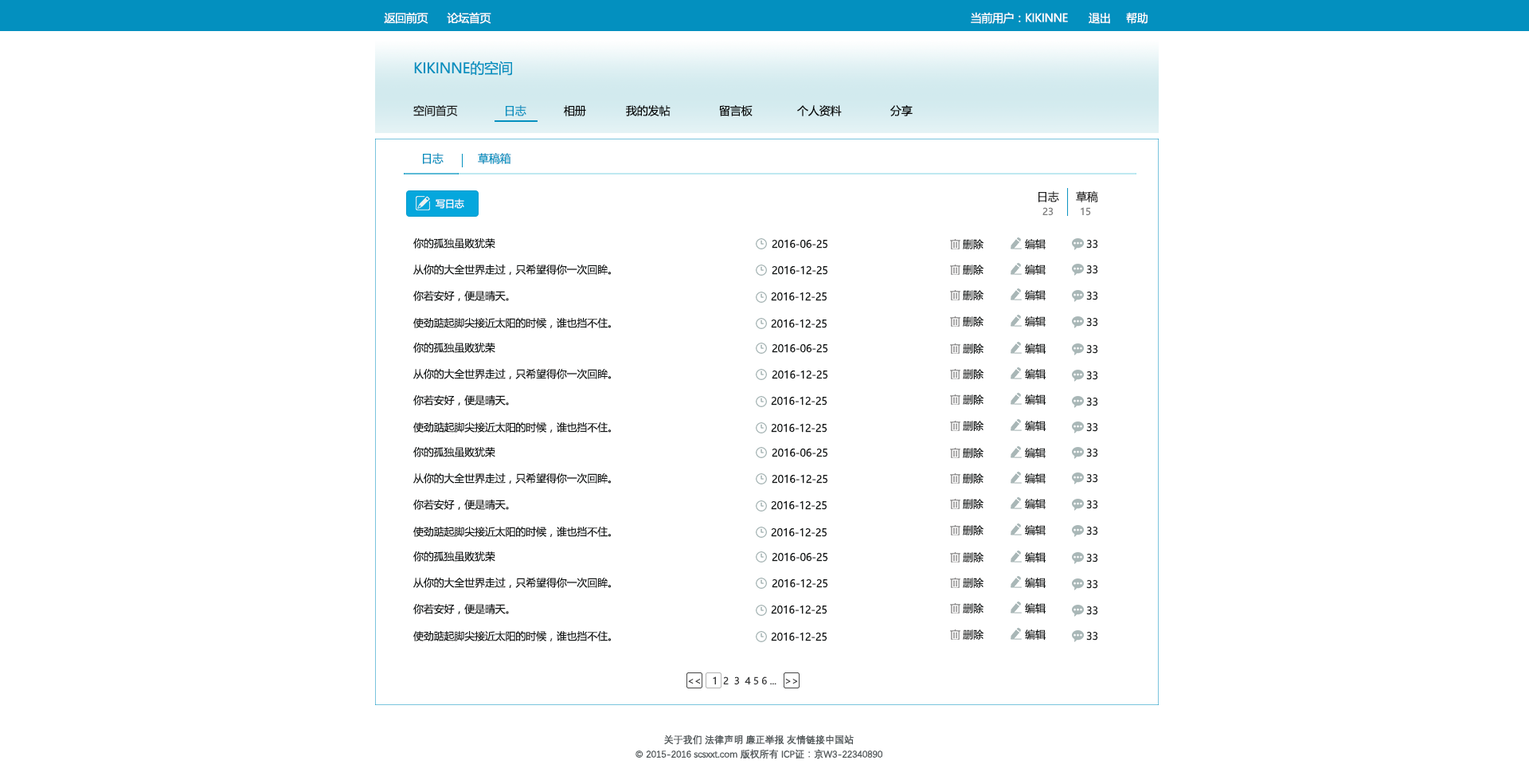
<style>
.page{position:relative;width:1529px;height:780px;background:#ffffff}
.page>*{position:absolute;margin:0}
.t1{font:11.2px "MicrosoftYaHei";letter-spacing:-0.025em;color:#ffffff}
.t2{font:14.3px "MicrosoftYaHei";letter-spacing:-0.01em;color:#0390bf}
.t3{font:11.2px "MicrosoftYaHei";letter-spacing:-0.01em;color:#1f2020}
.t4{font:11.2px "MicrosoftYaHei";letter-spacing:-0.01em;color:#0390bf}
.t5{font:11.2px "MicrosoftYaHei";letter-spacing:-0.01em;color:#040404}
.t6{font:11.2px "MicrosoftYaHei";letter-spacing:-0.01em;color:#242323}
.t7{font:9.6px "MicrosoftYaHei";letter-spacing:-0.01em;color:#ffffff}
.t8{font:9.6px "MicrosoftYaHei";letter-spacing:-0.01em;color:#7b7b7b}
.t9{font:10.4px "MicrosoftYaHei";letter-spacing:-0.01em;color:#131616}
.t10{font:9.6px "MicrosoftYaHei";letter-spacing:-0.01em;color:#38393a}
.t11{font:9.6px "MicrosoftYaHei";letter-spacing:-0.01em;color:#252626}
.t12{font:9.6px/14.3px "DengXian-Regular";letter-spacing:-0.025em;color:#545a5c;font-weight:bold}
</style>
<div class="page">
<p class="t1" style="left:384px;top:12px;width:45px;height:12px">返回前页</p>
<p class="t1" style="left:447px;top:12px;width:44px;height:12px">论坛首页</p>
<p class="t1" style="left:971px;top:12px;width:97px;height:12px">当前用户：KIKINNE</p>
<p class="t1" style="left:1089px;top:13px;width:21px;height:11px">退出</p>
<p class="t1" style="left:1126px;top:12px;width:22px;height:12px">帮助</p>
<p class="t2" style="left:414px;top:61px;width:98px;height:15px">KIKINNE的空间</p>
<p class="t3" style="left:413px;top:105px;width:45px;height:11px">空间首页</p>
<p class="t4" style="left:506px;top:105px;width:20px;height:11px">日志</p>
<p class="t5" style="left:564px;top:105px;width:22px;height:11px">相册</p>
<p class="t5" style="left:626px;top:105px;width:45px;height:11px">我的发帖</p>
<p class="t5" style="left:719px;top:105px;width:34px;height:11px">留言板</p>
<p class="t5" style="left:797px;top:105px;width:45px;height:11px">个人资料</p>
<p class="t5" style="left:890px;top:105px;width:23px;height:11px">分享</p>
<p class="t4" style="left:423px;top:153px;width:21px;height:11px">日志</p>
<p class="t4" style="left:478px;top:153px;width:33px;height:11px">草稿箱</p>
<p class="t6" style="left:1039px;top:191px;width:20px;height:11px">日志</p>
<p class="t6" style="left:1076px;top:191px;width:22px;height:11px">草稿</p>
<p class="t7" style="left:436px;top:198px;width:28px;height:11px">写日志</p>
<p class="t8" style="left:1043px;top:207px;width:11px;height:9px">23</p>
<p class="t8" style="left:1081px;top:207px;width:10px;height:9px">15</p>
<p class="t9" style="left:413px;top:238px;width:82px;height:11px">你的孤独虽败犹荣</p>
<p class="t9" style="left:772px;top:239px;width:56px;height:10px">2016-06-25</p>
<p class="t9" style="left:963px;top:239px;width:21px;height:10px">删除</p>
<p class="t9" style="left:1025px;top:239px;width:21px;height:10px">编辑</p>
<p class="t9" style="left:1086px;top:240px;width:12px;height:9px">33</p>
<p class="t9" style="left:413px;top:264px;width:199px;height:11px">从你的大全世界走过，只希望得你一次回眸。</p>
<p class="t9" style="left:772px;top:265px;width:56px;height:10px">2016-12-25</p>
<p class="t9" style="left:963px;top:264px;width:21px;height:11px">删除</p>
<p class="t9" style="left:1025px;top:264px;width:21px;height:11px">编辑</p>
<p class="t9" style="left:1086px;top:265px;width:12px;height:9px">33</p>
<p class="t9" style="left:413px;top:291px;width:96px;height:10px">你若安好，便是晴天。</p>
<p class="t9" style="left:771px;top:292px;width:57px;height:9px">2016-12-25</p>
<p class="t9" style="left:963px;top:290px;width:21px;height:10px">删除</p>
<p class="t9" style="left:1025px;top:290px;width:21px;height:10px">编辑</p>
<p class="t9" style="left:1086px;top:292px;width:12px;height:8px">33</p>
<p class="t9" style="left:413px;top:318px;width:199px;height:10px">使劲踮起脚尖接近太阳的时候，谁也挡不住。</p>
<p class="t9" style="left:963px;top:316px;width:21px;height:11px">删除</p>
<p class="t9" style="left:1025px;top:316px;width:21px;height:11px">编辑</p>
<p class="t9" style="left:1086px;top:318px;width:12px;height:9px">33</p>
<p class="t9" style="left:771px;top:319px;width:57px;height:9px">2016-12-25</p>
<p class="t9" style="left:413px;top:342px;width:82px;height:11px">你的孤独虽败犹荣</p>
<p class="t9" style="left:772px;top:343px;width:56px;height:10px">2016-06-25</p>
<p class="t9" style="left:963px;top:343px;width:21px;height:11px">删除</p>
<p class="t9" style="left:1025px;top:343px;width:21px;height:11px">编辑</p>
<p class="t9" style="left:1086px;top:345px;width:12px;height:9px">33</p>
<p class="t9" style="left:413px;top:369px;width:199px;height:10px">从你的大全世界走过，只希望得你一次回眸。</p>
<p class="t9" style="left:772px;top:370px;width:56px;height:9px">2016-12-25</p>
<p class="t9" style="left:963px;top:369px;width:21px;height:10px">删除</p>
<p class="t9" style="left:1025px;top:369px;width:21px;height:10px">编辑</p>
<p class="t9" style="left:1086px;top:371px;width:12px;height:9px">33</p>
<p class="t9" style="left:413px;top:395px;width:96px;height:10px">你若安好，便是晴天。</p>
<p class="t9" style="left:771px;top:396px;width:57px;height:9px">2016-12-25</p>
<p class="t9" style="left:963px;top:394px;width:21px;height:11px">删除</p>
<p class="t9" style="left:1025px;top:394px;width:21px;height:11px">编辑</p>
<p class="t9" style="left:1086px;top:397px;width:12px;height:9px">33</p>
<p class="t9" style="left:413px;top:422px;width:199px;height:10px">使劲踮起脚尖接近太阳的时候，谁也挡不住。</p>
<p class="t9" style="left:771px;top:423px;width:57px;height:9px">2016-12-25</p>
<p class="t9" style="left:963px;top:421px;width:21px;height:10px">删除</p>
<p class="t9" style="left:1025px;top:421px;width:21px;height:10px">编辑</p>
<p class="t9" style="left:1086px;top:423px;width:12px;height:9px">33</p>
<p class="t9" style="left:413px;top:447px;width:82px;height:10px">你的孤独虽败犹荣</p>
<p class="t9" style="left:772px;top:448px;width:56px;height:9px">2016-06-25</p>
<p class="t9" style="left:963px;top:448px;width:21px;height:10px">删除</p>
<p class="t9" style="left:1025px;top:448px;width:21px;height:10px">编辑</p>
<p class="t9" style="left:1086px;top:448px;width:12px;height:9px">33</p>
<p class="t9" style="left:413px;top:473px;width:199px;height:10px">从你的大全世界走过，只希望得你一次回眸。</p>
<p class="t9" style="left:772px;top:474px;width:56px;height:9px">2016-12-25</p>
<p class="t9" style="left:963px;top:473px;width:21px;height:10px">删除</p>
<p class="t9" style="left:1025px;top:473px;width:21px;height:10px">编辑</p>
<p class="t9" style="left:1086px;top:474px;width:12px;height:9px">33</p>
<p class="t9" style="left:413px;top:499px;width:96px;height:11px">你若安好，便是晴天。</p>
<p class="t9" style="left:771px;top:500px;width:57px;height:10px">2016-12-25</p>
<p class="t9" style="left:963px;top:499px;width:21px;height:10px">删除</p>
<p class="t9" style="left:1025px;top:499px;width:21px;height:10px">编辑</p>
<p class="t9" style="left:1086px;top:500px;width:12px;height:9px">33</p>
<p class="t9" style="left:413px;top:526px;width:199px;height:11px">使劲踮起脚尖接近太阳的时候，谁也挡不住。</p>
<p class="t9" style="left:771px;top:527px;width:57px;height:10px">2016-12-25</p>
<p class="t9" style="left:963px;top:525px;width:21px;height:10px">删除</p>
<p class="t9" style="left:1025px;top:525px;width:21px;height:10px">编辑</p>
<p class="t9" style="left:1086px;top:526px;width:12px;height:9px">33</p>
<p class="t9" style="left:413px;top:551px;width:82px;height:11px">你的孤独虽败犹荣</p>
<p class="t9" style="left:772px;top:552px;width:56px;height:10px">2016-06-25</p>
<p class="t9" style="left:963px;top:552px;width:21px;height:10px">删除</p>
<p class="t9" style="left:1025px;top:552px;width:21px;height:10px">编辑</p>
<p class="t9" style="left:1086px;top:554px;width:12px;height:8px">33</p>
<p class="t9" style="left:413px;top:577px;width:199px;height:11px">从你的大全世界走过，只希望得你一次回眸。</p>
<p class="t9" style="left:772px;top:578px;width:56px;height:10px">2016-12-25</p>
<p class="t9" style="left:963px;top:577px;width:21px;height:11px">删除</p>
<p class="t9" style="left:1025px;top:577px;width:21px;height:11px">编辑</p>
<p class="t9" style="left:1086px;top:580px;width:12px;height:9px">33</p>
<p class="t9" style="left:413px;top:604px;width:96px;height:10px">你若安好，便是晴天。</p>
<p class="t9" style="left:771px;top:605px;width:57px;height:9px">2016-12-25</p>
<p class="t9" style="left:963px;top:603px;width:21px;height:10px">删除</p>
<p class="t9" style="left:1025px;top:603px;width:21px;height:10px">编辑</p>
<p class="t9" style="left:1086px;top:606px;width:12px;height:9px">33</p>
<p class="t9" style="left:963px;top:629px;width:21px;height:11px">删除</p>
<p class="t9" style="left:1025px;top:629px;width:21px;height:11px">编辑</p>
<p class="t9" style="left:413px;top:631px;width:199px;height:10px">使劲踮起脚尖接近太阳的时候，谁也挡不住。</p>
<p class="t9" style="left:771px;top:632px;width:57px;height:9px">2016-12-25</p>
<p class="t9" style="left:1086px;top:632px;width:12px;height:8px">33</p>
<p class="t10" style="left:688px;top:676px;width:110px;height:9px">&lt;&lt;    1  2 <span class="t11"> 3</span>  4 5 6 ...   &gt;&gt;</p>
<p class="t12" style="left:636px;top:734px;width:247px;height:25px;text-align:center">关于我们 法律声明 廉正举报 友情链接中国站<br>© 2015-2016 scsxxt.com 版权所有 ICP证：京W3-22340890</p>
</div>
